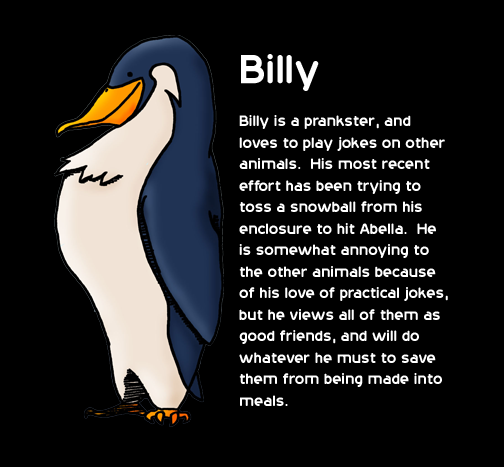
<style>
.page{position:relative;width:504px;height:467px;background:#000000}
.page>*{position:absolute;margin:0}
.t1{font:17.9px "20thCenturyFont";color:#ffffff}
.t2{font:47.8px "20thCenturyFont";color:#ffffff}
</style>
<div class="page">
<p class="t1" style="left:239px;top:54px;width:209px;height:352px"><span class="t2">Billy<br></span><br>Billy is a prankster, and<br>loves to play jokes on other <br>animals.  His most recent <br>effort has been trying to <br>toss a snowball from his <br>enclosure to hit Abella.  He <br>is somewhat annoying to <br>the other animals because <br>of his love of practical jokes, <br>but he views all of them as <br>good friends, and will do <br>whatever he must to save <br>them from being made into <br>meals.</p>
</div>
